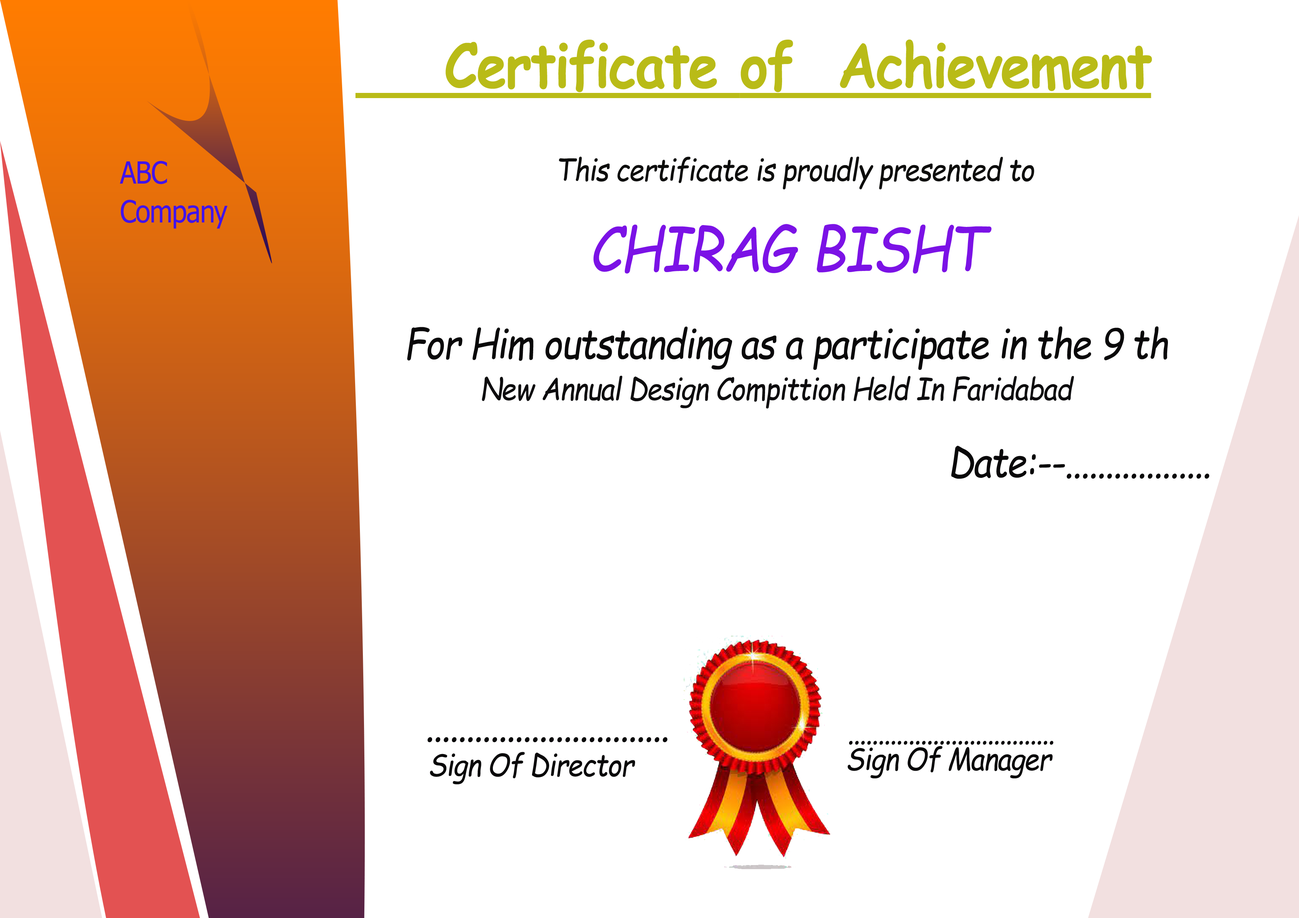
<style>
.page{position:relative;width:1299px;height:918px;background:#ffffff}
.page>*{position:absolute;margin:0}
.t1{font:61.1px "ComicSansMS-Bold";letter-spacing:-0.025em;color:#b9bb17;text-decoration:underline;scale:0.89 1}
.t2{font:30.5px/12.9px "Tahoma";letter-spacing:-0.025em;color:#4113eb;scale:0.89 1}
.t3{font:30.5px "ComicSansMS-Italic";letter-spacing:-0.025em;color:#0d0d0c;scale:0.89 1}
.t4{font:61.1px "ComicSansMS-Italic";letter-spacing:-0.025em;color:#7b12e6;scale:0.89 1}
.t5{font:40.7px "ComicSansMS-Italic";letter-spacing:-0.025em;color:#090809;scale:0.89 1}
.t6{font:30.5px "ComicSansMS-Italic";letter-spacing:-0.025em;color:#0d0c0e;scale:0.89 1}
.t7{font:30.5px "ComicSansMS-Italic";letter-spacing:-0.025em;color:#090809;scale:0.89 1}
</style>
<div class="page">
<p class="t1" style="left:355px;top:39px;width:797px;height:59px">Certificate of  Achievement</p>
<p class="t2" style="left:120px;top:161px;width:108px;height:68px">ABC <br><br><br>Company</p>
<p class="t3" style="left:559px;top:157px;width:475px;height:33px">This certificate is proudly presented to</p>
<p class="t4" style="left:593px;top:224px;width:398px;height:50px">CHIRAG BISHT</p>
<p class="t5" style="left:407px;top:326px;width:761px;height:44px">For Him outstanding as a participate in the 9 th</p>
<p class="t6" style="left:482px;top:376px;width:592px;height:33px">New Annual Design Compittion Held In Faridabad</p>
<p class="t5" style="left:951px;top:446px;width:258px;height:33px">Date:--..................</p>
<p class="t5" style="left:427px;top:737px;width:241px;height:5px">..............................</p>
<p class="t7" style="left:847px;top:746px;width:206px;height:33px">Sign Of Manager</p>
<p class="t7" style="left:849px;top:741px;width:204px;height:4px">..................................</p>
<p class="t7" style="left:430px;top:752px;width:205px;height:32px">Sign Of Director</p>
</div>
